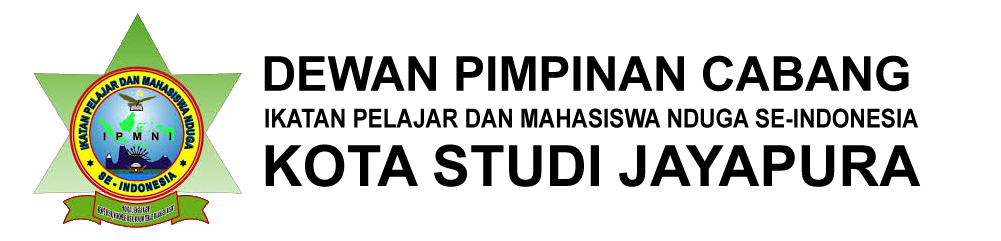
<style>
.page{position:relative;width:1001px;height:241px;background:#ffffff}
.page>*{position:absolute;margin:0}
.t1{font:48px "Arial-BoldMT";color:#000000;text-transform:uppercase}
.t2{font:26.1px "Arial-BoldMT";color:#000000;text-transform:uppercase;scale:0.87 1}
.t3{font:56.9px "Arial-BoldMT";color:#000000;text-transform:uppercase}
</style>
<div class="page">
<p class="t1" style="left:264px;top:55px;width:645px;height:37px">Dewan Pimpinan Cabang</p>
<p class="t2" style="left:265px;top:108px;width:653px;height:20px">Ikatan Pelajar Dan Mahasiswa Nduga Se-Indonesia</p>
<p class="t3" style="left:265px;top:144px;width:656px;height:43px">Kota Studi Jayapura</p>
</div>
